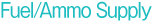
<style>
.page{position:relative;width:153px;height:21px;background:#ffffff}
.page>*{position:absolute;margin:0}
.t1{font:20px "GothicMB101Pro-Regular";letter-spacing:-0.06em;color:#1dbcc0;scale:0.9 1}
</style>
<div class="page">
<p class="t1" style="left:1px;top:1px;width:151px;height:20px">Fuel/Ammo Supply</p>
</div>
